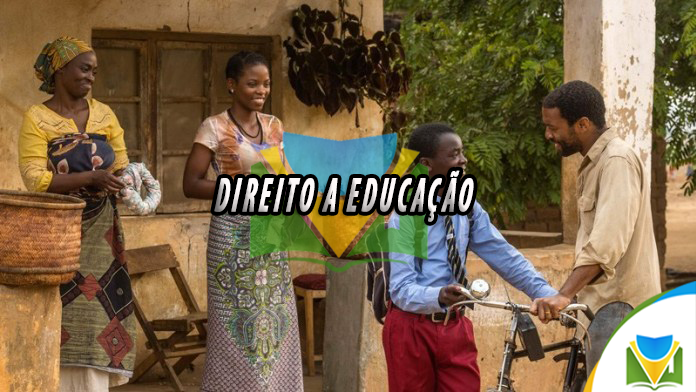
<style>
.page{position:relative;width:696px;height:392px}
.page>*{position:absolute;margin:0}
.t1{font:48.6px "MyriadPro-BoldCondIt";letter-spacing:0.1em;color:#fdf8f8;text-transform:uppercase;font-weight:bold;font-style:italic;scale:0.56 1}
</style>
<div class="page">
<p class="t1" style="left:214px;top:170px;width:260px;height:52px">Direito a Educação</p>
</div>
